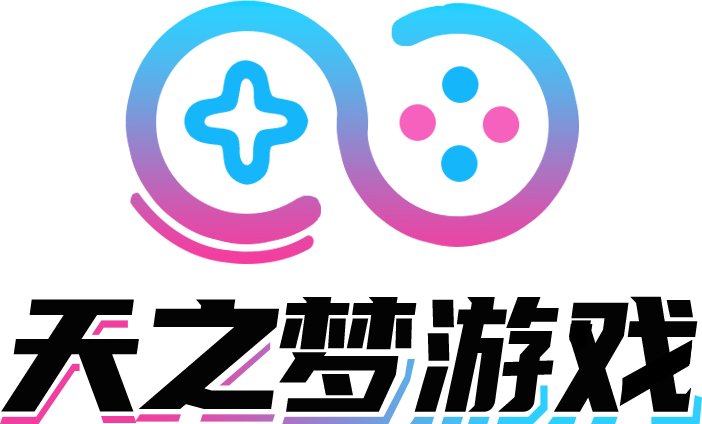
<style>
.page{position:relative;width:702px;height:424px;background:#ffffff}
.page>*{position:absolute;margin:0}
.t1{font:159.6px "YouSheBiaoTiHei";letter-spacing:-0.04em;color:#030303}
</style>
<div class="page">
<p class="t1" style="left:1px;top:296px;width:697px;height:116px">天之梦游戏</p>
</div>
